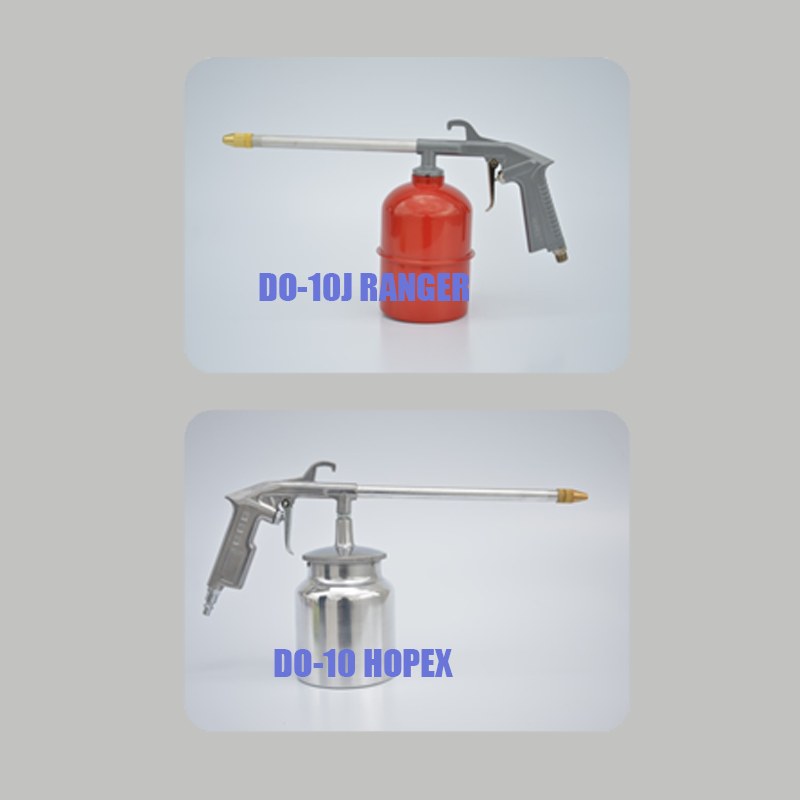
<style>
.page{position:relative;width:800px;height:800px;background:#c2c2c1}
.page>*{position:absolute;margin:0}
.t1{font:36px "Impact";color:#6a75d9}
</style>
<div class="page">
<p class="t1" style="left:259px;top:273px;width:210px;height:28px">DO-10J RANGER</p>
<p class="t1" style="left:274px;top:649px;width:179px;height:28px">DO-10 HOPEX</p>
</div>
